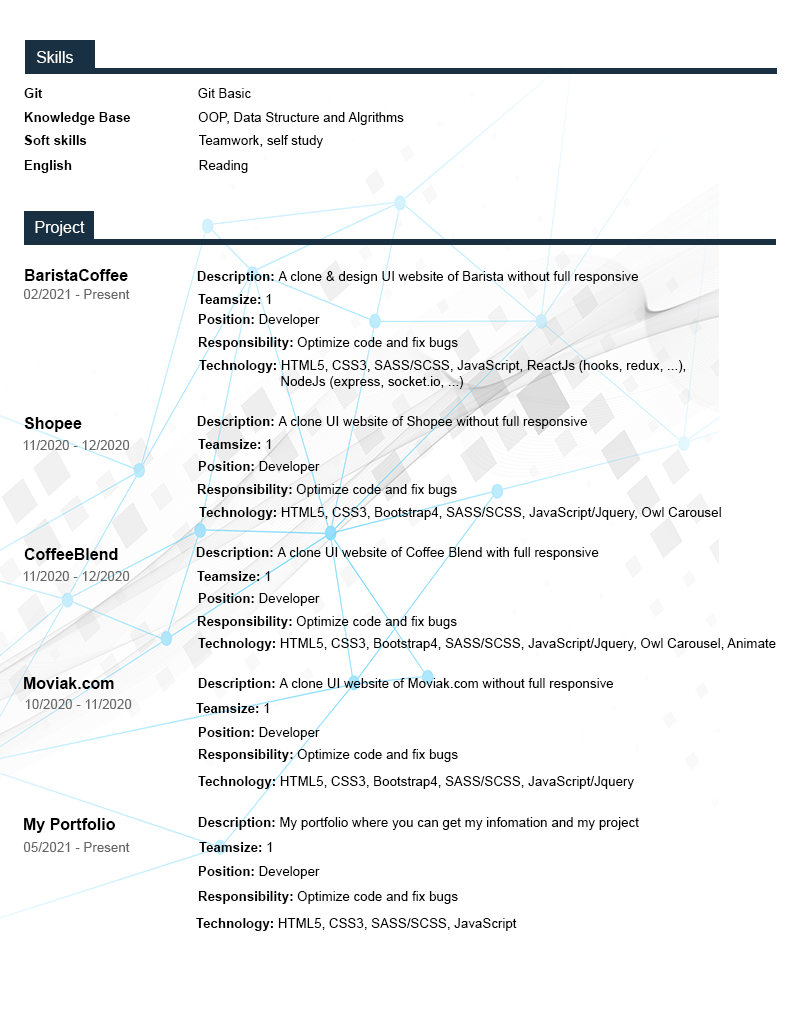
<style>
.page{position:relative;width:800px;height:1024px;background:#ffffff}
.page>*{position:absolute;margin:0}
.t1{font:16px "ArialMT";color:#ffffff}
.t2{font:13.3px "Arial-BoldMT";color:#000000}
.t3{font:13.3px "ArialMT";color:#000000}
.t4{font:16px "Arial-BoldMT";color:#000000}
.t5{font:13.3px "ArialMT";color:#666666}
</style>
<div class="page">
<p class="t1" style="left:37px;top:51px;width:36px;height:12px">Skills</p>
<p class="t2" style="left:24px;top:88px;width:19px;height:10px">Git</p>
<p class="t3" style="left:198px;top:88px;width:53px;height:10px">Git Basic</p>
<p class="t2" style="left:24px;top:112px;width:107px;height:13px">Knowledge Base</p>
<p class="t3" style="left:198px;top:112px;width:206px;height:13px">OOP, Data Structure and Algrithms</p>
<p class="t2" style="left:24px;top:135px;width:63px;height:10px">Soft skills</p>
<p class="t3" style="left:198px;top:135px;width:125px;height:13px">Teamwork, self study</p>
<p class="t2" style="left:24px;top:160px;width:48px;height:13px">English</p>
<p class="t3" style="left:199px;top:160px;width:49px;height:13px">Reading</p>
<p class="t1" style="left:35px;top:221px;width:50px;height:15px">Project</p>
<p class="t4" style="left:25px;top:269px;width:103px;height:12px">BaristaCoffee</p>
<p class="t3" style="left:197px;top:271px;width:441px;height:13px"><span class="t2">Description: </span>A clone &amp; design UI website of Barista without full responsive</p>
<p class="t5" style="left:23px;top:289px;width:107px;height:10px">02/2021 - Present</p>
<p class="t2" style="left:198px;top:294px;width:73px;height:10px">Teamsize: <span class="t3">1</span></p>
<p class="t2" style="left:198px;top:314px;width:122px;height:13px">Position: <span class="t3">Developer</span></p>
<p class="t3" style="left:198px;top:337px;width:260px;height:13px"><span class="t2">Responsibility: </span>Optimize code and fix bugs</p>
<p class="t3" style="left:199px;top:360px;width:487px;height:29px"><span class="t2">Technology: </span>HTML5, CSS3, SASS/SCSS, JavaScript, ReactJs (hooks, redux, ...), <br>                      NodeJs (express, socket.io, ...)</p>
<p class="t4" style="left:24px;top:417px;width:58px;height:15px">Shopee</p>
<p class="t3" style="left:197px;top:416px;width:390px;height:13px"><span class="t2">Description: </span>A clone UI website of Shopee without full responsive</p>
<p class="t5" style="left:23px;top:440px;width:107px;height:10px">11/2020 - 12/2020</p>
<p class="t2" style="left:198px;top:439px;width:73px;height:10px">Teamsize: <span class="t3">1</span></p>
<p class="t2" style="left:198px;top:461px;width:122px;height:13px">Position: <span class="t3">Developer</span></p>
<p class="t3" style="left:197px;top:484px;width:260px;height:13px"><span class="t2">Responsibility: </span>Optimize code and fix bugs</p>
<p class="t3" style="left:199px;top:507px;width:522px;height:13px"><span class="t2">Technology: </span>HTML5, CSS3, Bootstrap4, SASS/SCSS, JavaScript/Jquery, Owl Carousel</p>
<p class="t4" style="left:24px;top:548px;width:94px;height:12px">CoffeeBlend</p>
<p class="t3" style="left:196px;top:547px;width:403px;height:13px"><span class="t2">Description: </span>A clone UI website of Coffee Blend with full responsive</p>
<p class="t5" style="left:23px;top:571px;width:107px;height:10px">11/2020 - 12/2020</p>
<p class="t2" style="left:197px;top:571px;width:73px;height:10px">Teamsize: <span class="t3">1</span></p>
<p class="t2" style="left:198px;top:593px;width:122px;height:13px">Position: <span class="t3">Developer</span></p>
<p class="t3" style="left:197px;top:616px;width:260px;height:13px"><span class="t2">Responsibility: </span>Optimize code and fix bugs</p>
<p class="t3" style="left:198px;top:638px;width:578px;height:13px"><span class="t2">Technology: </span>HTML5, CSS3, Bootstrap4, SASS/SCSS, JavaScript/Jquery, Owl Carousel, Animate</p>
<p class="t4" style="left:24px;top:677px;width:90px;height:12px">Moviak.com</p>
<p class="t3" style="left:198px;top:678px;width:415px;height:13px"><span class="t2">Description: </span>A clone UI website of Moviak.com without full responsive</p>
<p class="t5" style="left:25px;top:699px;width:107px;height:10px">10/2020 - 11/2020</p>
<p class="t2" style="left:196px;top:703px;width:73px;height:10px">Teamsize: <span class="t3">1</span></p>
<p class="t2" style="left:198px;top:727px;width:122px;height:13px">Position: <span class="t3">Developer</span></p>
<p class="t3" style="left:198px;top:749px;width:260px;height:13px"><span class="t2">Responsibility: </span>Optimize code and fix bugs</p>
<p class="t3" style="left:198px;top:776px;width:436px;height:13px"><span class="t2">Technology: </span>HTML5, CSS3, Bootstrap4, SASS/SCSS, JavaScript/Jquery</p>
<p class="t4" style="left:24px;top:818px;width:92px;height:15px">My Portfolio</p>
<p class="t3" style="left:198px;top:817px;width:441px;height:13px"><span class="t2">Description: </span>My portfolio where you can get my infomation and my project</p>
<p class="t5" style="left:23px;top:842px;width:107px;height:10px">05/2021 - Present</p>
<p class="t2" style="left:199px;top:842px;width:73px;height:10px">Teamsize: <span class="t3">1</span></p>
<p class="t2" style="left:198px;top:866px;width:122px;height:13px">Position: <span class="t3">Developer</span></p>
<p class="t3" style="left:198px;top:891px;width:260px;height:13px"><span class="t2">Responsibility: </span>Optimize code and fix bugs</p>
<p class="t3" style="left:196px;top:918px;width:321px;height:13px"><span class="t2">Technology: </span>HTML5, CSS3, SASS/SCSS, JavaScript</p>
</div>
